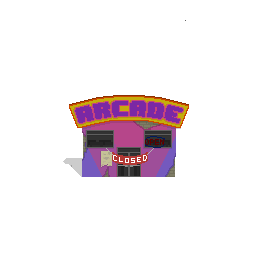
<style>
.page{position:relative;width:256px;height:256px;background:#ffffff}
.page>*{position:absolute;margin:0}
.t1{font:16.7px "8BITWONDERNominal";color:#7a28a5}
</style>
<div class="page">
<p class="t1" style="left:75px;top:101px;width:108px;height:22px">ARCADE</p>
</div>
